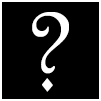
<style>
.page{position:relative;width:101px;height:101px;background:#000000}
.page>*{position:absolute;margin:0}
.t1{font:131px "FrenchScriptMT";color:#ffffff}
</style>
<div class="page">
<p class="t1" style="left:32px;top:12px;width:37px;height:80px">?</p>
</div>
